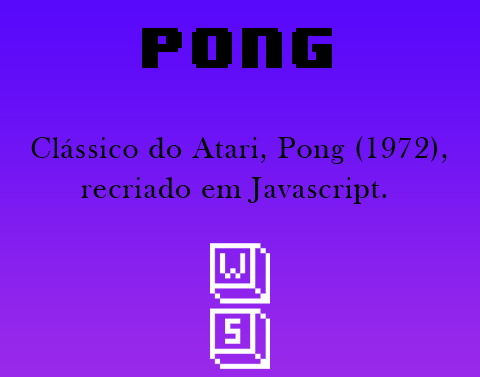
<style>
.page{position:relative;width:480px;height:377px}
.page>*{position:absolute;margin:0}
.t1{font:48px "8BITWONDERNominal";letter-spacing:0.04em;color:#000000}
.t2{font:31px/40px "BaskOldFace";letter-spacing:0.04em;color:#000000}
</style>
<div class="page">
<p class="t1" style="left:142px;top:28px;width:190px;height:40px">Pong</p>
<p class="t2" style="left:31px;top:136px;width:416px;height:68px;text-align:center">Clássico do Atari, Pong (1972),<br>recriado em Javascript.</p>
</div>
